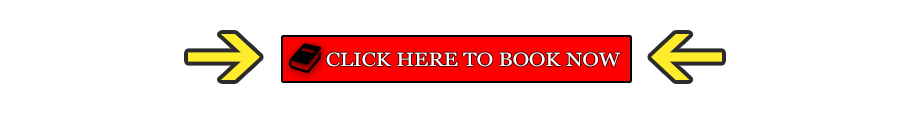
<style>
.page{position:relative;width:900px;height:113px;background:#ffffff}
.page>*{position:absolute;margin:0}
.t1{font:19px "Georgia";color:#ffffff;scale:1.15 1}
</style>
<div class="page">
<p class="t1" style="left:326px;top:52px;width:295px;height:15px">CLICK HERE TO BOOK NOW</p>
</div>
